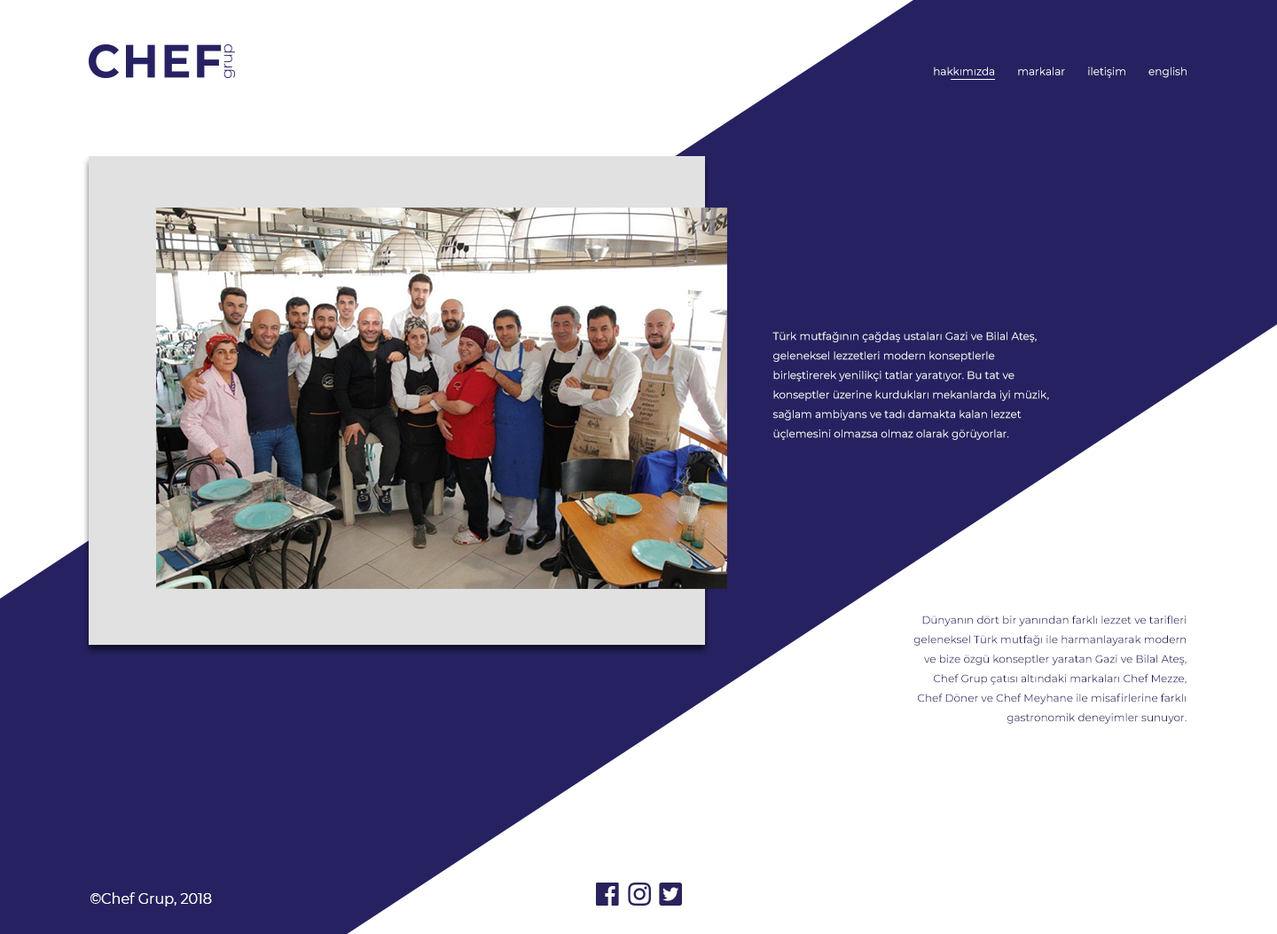
<style>
.page{position:relative;width:1277px;height:934px;background:#ffffff}
.page>*{position:absolute;margin:0}
.t1{font:10.6px "Montserrat-Regular";color:#ffffff}
.t2{font:10.6px/19.5px "Montserrat-Regular";color:#ffffff}
.t3{font:10.6px/19.5px "Montserrat-Regular";color:#262262}
.t4{font:14.2px "Montserrat-Regular";color:#ffffff}
</style>
<div class="page">
<p class="t1" style="left:934px;top:67px;width:253px;height:11px">hakkımızda        markalar        iletişim        english</p>
<p class="t2" style="left:772px;top:332px;width:277px;height:108px">Türk mutfağının çağdaş ustaları Gazi ve Bilal Ateş, geleneksel lezzetleri modern konseptlerle birleştirerek yenilikçi tatlar yaratıyor. Bu tat ve konseptler üzerine kurdukları mekanlarda iyi müzik, sağlam ambiyans ve tadı damakta kalan lezzet üçlemesini olmazsa olmaz olarak görüyorlar.</p>
<p class="t3" style="left:913px;top:615px;width:274px;height:109px;text-align:right">Dünyanın dört bir yanından farklı lezzet ve tarifleri geleneksel Türk mutfağı ile harmanlayarak modern ve bize özgü konseptler yaratan Gazi ve Bilal Ateş, Chef Grup çatısı altındaki markaları Chef Mezze, Chef Döner ve Chef Meyhane ile misafirlerine farklı gastronomik deneyimler sunuyor.</p>
<p class="t4" style="left:90px;top:892px;width:122px;height:14px">©Chef Grup, 2018</p>
</div>
